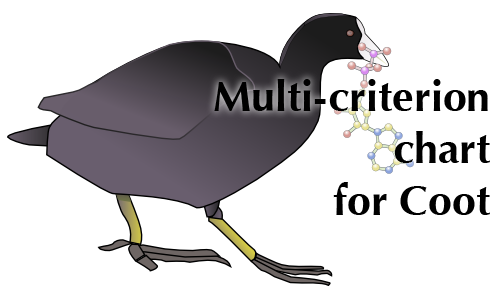
<style>
.page{position:relative;width:500px;height:300px;background:#ffffff}
.page>*{position:absolute;margin:0}
.t1{font:43.1px "Optima-Bold";color:#000000}
</style>
<div class="page">
<p class="t1" style="left:214px;top:79px;width:276px;height:136px;text-align:right">Multi-criterion<br>chart<br>for Coot</p>
</div>
